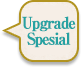
<style>
.page{position:relative;width:81px;height:67px;background:#f6eee6}
.page>*{position:absolute;margin:0}
.t1{font:16px/16px "RyuminPro-ExBold";letter-spacing:-0.08em;color:#26a2a2;font-weight:bold;scale:0.9 1}
</style>
<div class="page">
<p class="t1" style="left:22px;top:16px;width:54px;height:32px;text-align:center">Upgrade<br>Spesial</p>
</div>
